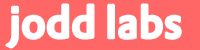
<style>
.page{position:relative;width:200px;height:50px;background:#ff6666}
.page>*{position:absolute;margin:0}
.t1{font:44px "DTLProkyonTMedium";letter-spacing:-0.03em;color:#ffffff;font-weight:bold}
</style>
<div class="page">
<p class="t1" style="left:6px;top:4px;width:175px;height:44px">jodd labs</p>
</div>
